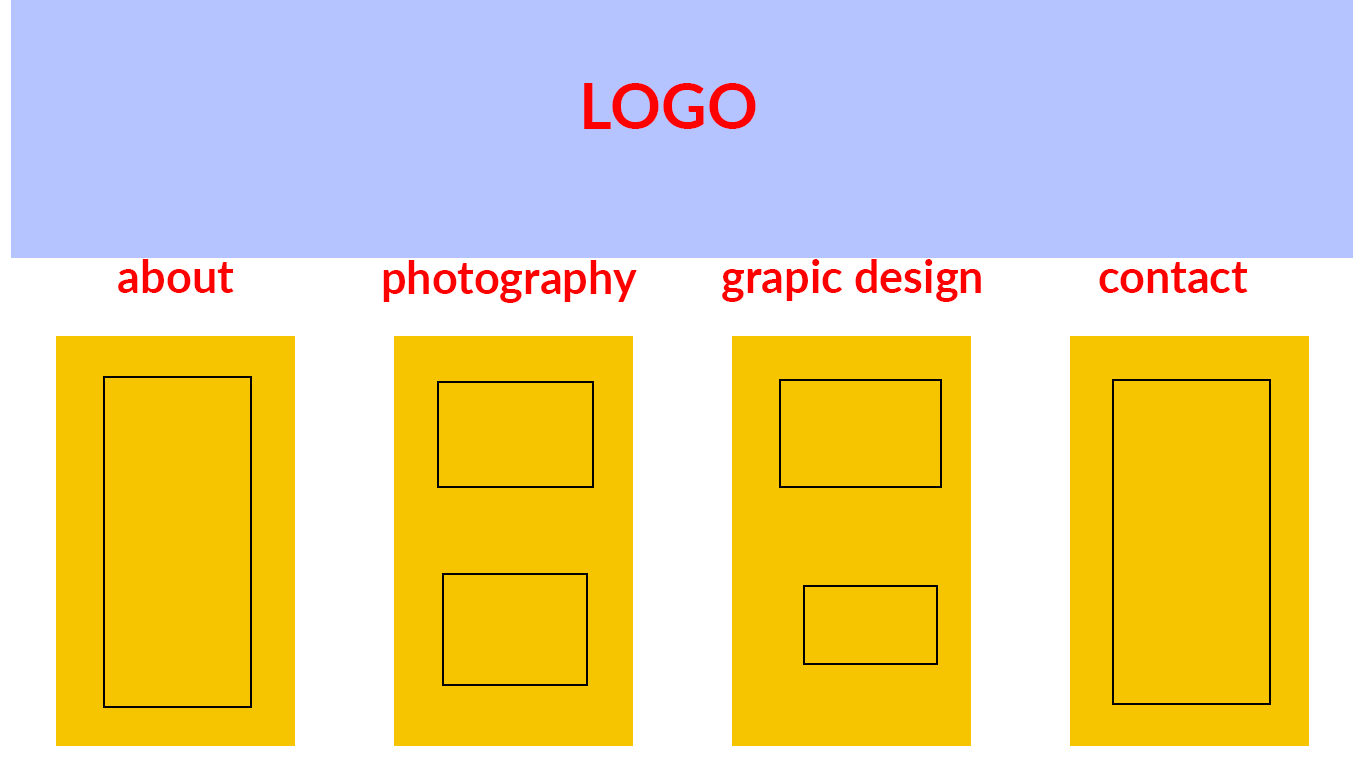
<style>
.page{position:relative;width:1366px;height:768px;background:#f6c500}
.page>*{position:absolute;margin:0}
.t1{font:63px "Lato-Bold";color:#ff0000}
.t2{font:45px "Lato-Bold";color:#ff0000}
</style>
<div class="page">
<p class="t1" style="left:584px;top:83px;width:172px;height:46px">LOGO</p>
<p class="t2" style="left:118px;top:259px;width:116px;height:34px">about</p>
<p class="t2" style="left:383px;top:260px;width:254px;height:43px">photography</p>
<p class="t2" style="left:722px;top:259px;width:259px;height:43px">grapic design</p>
<p class="t2" style="left:1099px;top:262px;width:149px;height:31px">contact</p>
</div>
